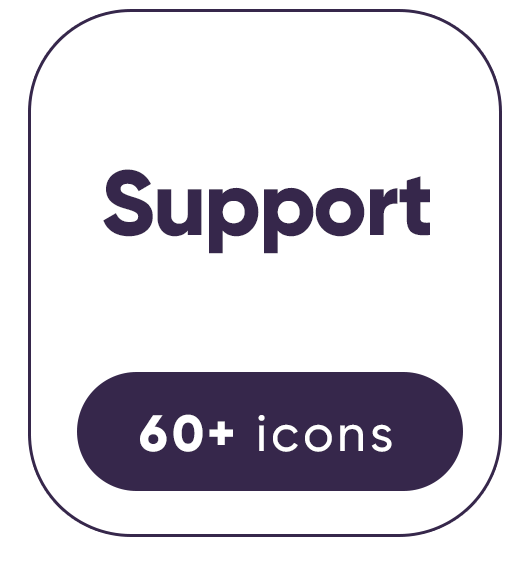
<style>
.page{position:relative;width:524px;height:562px;background:#ffffff}
.page>*{position:absolute;margin:0}
.t1{font:91.7px "Gilroy-ExtraBold";letter-spacing:-0.025em;color:#36274b}
.t2{font:50.9px "Gilroy-Medium";letter-spacing:0.075em;color:#ffffff}
.t3{font:50.9px "Gilroy-ExtraBold";letter-spacing:0.075em;color:#ffffff}
</style>
<div class="page">
<p class="t1" style="left:103px;top:169px;width:327px;height:85px">Support</p>
<p class="t2" style="left:140px;top:414px;width:252px;height:38px"><span class="t3">60+ </span>icons</p>
</div>
